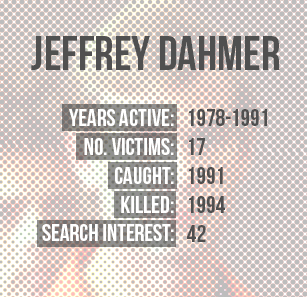
<style>
.page{position:relative;width:307px;height:297px;background:#bdbdbd}
.page>*{position:absolute;margin:0}
.t1{font:48px "BebasNeue";color:#505050}
.t2{font:24px "BebasNeue";color:#ffffff}
.t3{font:24px/125px "BebasNeue";color:#ffffff}
.t4{font:24px "BebasNeue";color:#505050}
.t5{font:24px/125px "BebasNeue";color:#505050}
</style>
<div class="page">
<p class="t1" style="left:31px;top:36px;width:249px;height:34px">JEFFREY DAHMER</p>
<p class="t2" style="left:42px;top:109px;width:132px;height:132px;text-align:right"><span class="t3">YEARS ACTIVE:<br></span>No. Victims:<br>cAUGHT:<br>KILLED:<br>SEARCH INTEREST:</p>
<p class="t4" style="left:187px;top:109px;width:80px;height:133px"><span class="t5">1978-1991<br></span>17<br>1991<br>1994<br>42</p>
</div>
